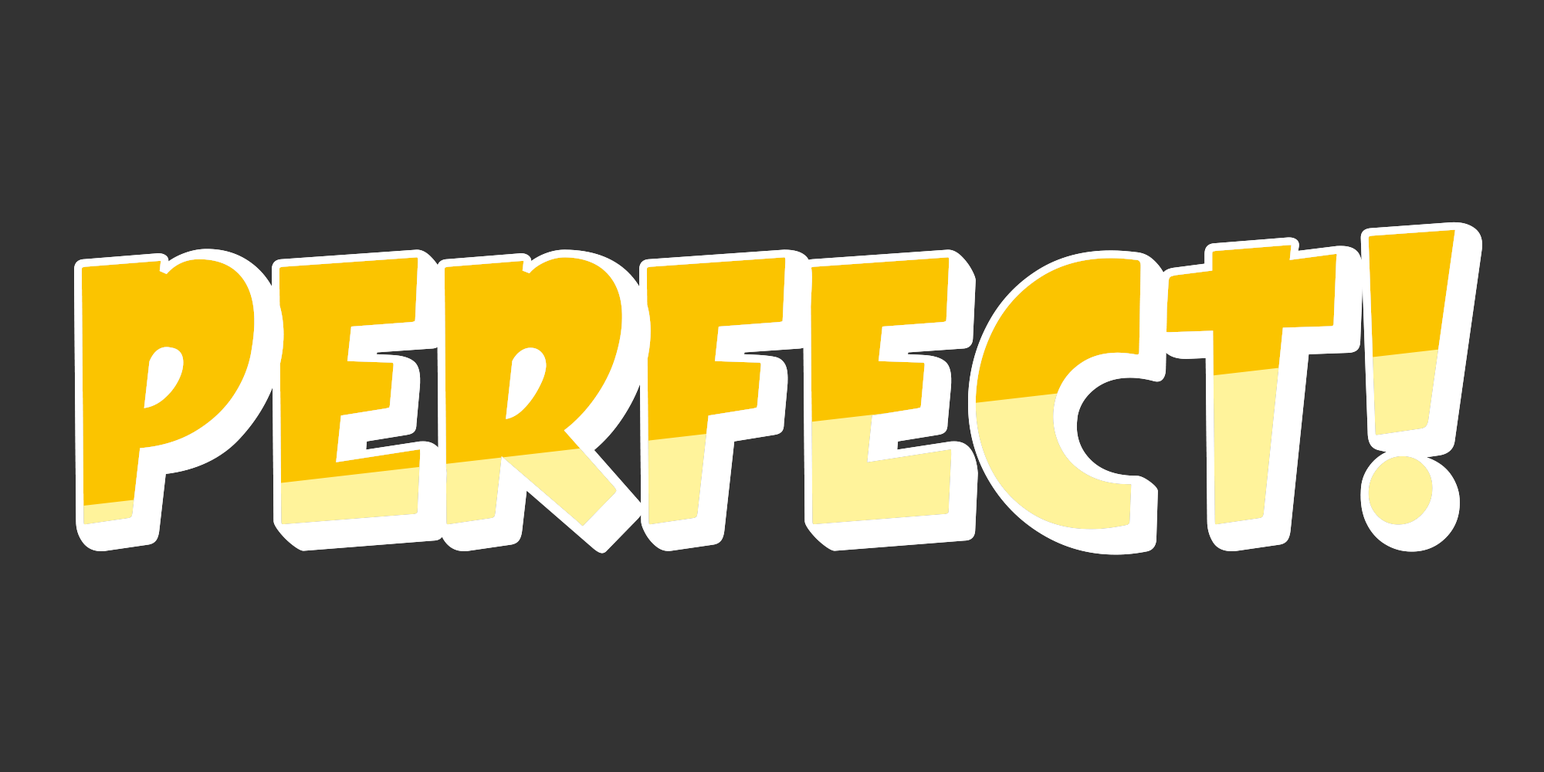
<style>
.page{position:relative;width:1544px;height:772px;background:#333333}
.page>*{position:absolute;margin:0}
.t1{font:378.8px "Komigo3D-Regular";letter-spacing:0.025em;color:#ffffff}
</style>
<div class="page">
<p class="t1" style="left:74px;top:222px;width:1409px;height:333px">PERFECT!</p>
</div>
